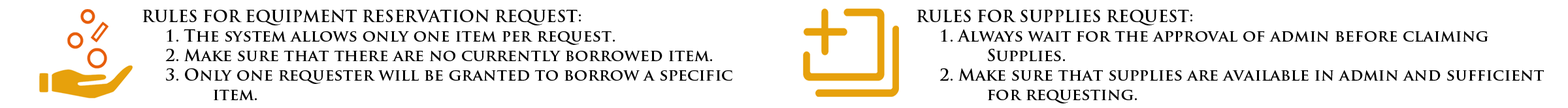
<style>
.page{position:relative;width:1568px;height:108px;background:#ffffff}
.page>*{position:absolute;margin:0}
.t1{font:16.3px "TrajanPro-Bold";color:#000000}
</style>
<div class="page">
<p class="t1" style="left:142px;top:9px;width:590px;height:92px">RULES FOR EQUIPMENT RESERVATION REQUEST:<br>  1. The system allows only one item per request.<br> 2. Make sure that there are no currently borrowed item.<br> 3. Only one requester will be granted to borrow a specific<br>   item.</p>
<p class="t1" style="left:917px;top:9px;width:627px;height:95px">RULES FOR SUPPLIES REQUEST:<br>  1. Always wait for the approval of admin before claiming<br>   Supplies.<br> 2. Make sure that supplies are available in admin and sufficient<br>   for requesting.</p>
</div>
